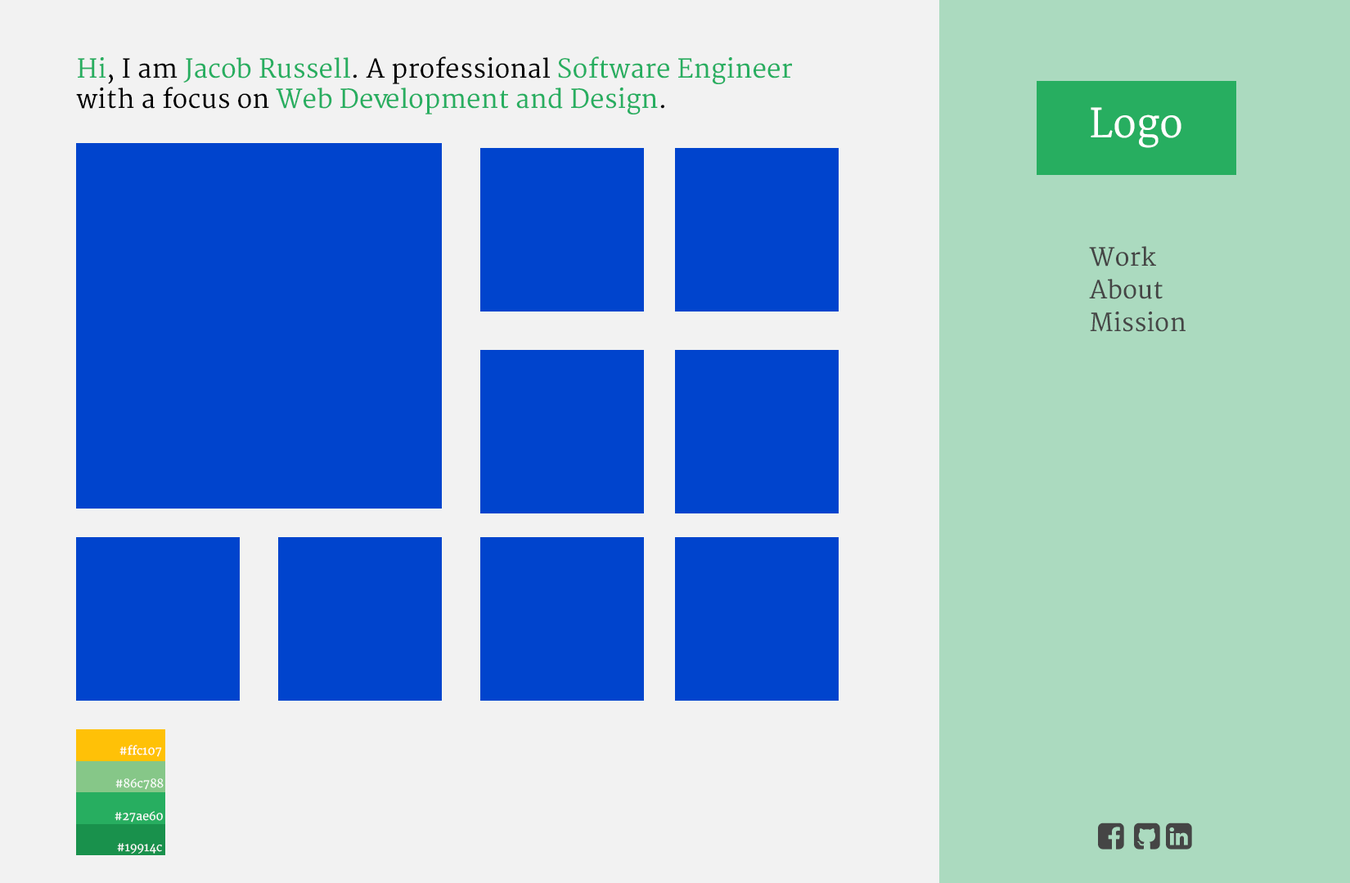
<style>
.page{position:relative;width:1350px;height:883px;background:#f2f2f2}
.page>*{position:absolute;margin:0}
.t1{font:25.6px "Merriweather";color:#27ae60}
.t2{font:25.6px "Merriweather";color:#000000}
.t3{font:39.3px "Merriweather";color:#ffffff}
.t4{font:24.5px "Merriweather";color:#454545}
.t5{font:24.5px "Merriweather";color:#464646}
.t6{font:11.5px "Merriweather";color:#ffffff}
</style>
<div class="page">
<p class="t1" style="left:76px;top:56px;width:716px;height:59px">Hi<span class="t2">, I am </span>Jacob Russell<span class="t2">. A professional </span>Software Engineer<br><span class="t2">with a focus on </span>Web Development and Design<span class="t2">.</span></p>
<p class="t3" style="left:1090px;top:107px;width:91px;height:41px">Logo</p>
<p class="t4" style="left:1089px;top:246px;width:67px;height:21px">Work</p>
<p class="t4" style="left:1089px;top:279px;width:73px;height:20px">About</p>
<p class="t5" style="left:1090px;top:312px;width:95px;height:20px">Mission</p>
<p class="t6" style="left:119px;top:745px;width:43px;height:12px">#ffc107</p>
<p class="t6" style="left:115px;top:779px;width:49px;height:11px">#86c788</p>
<p class="t6" style="left:115px;top:811px;width:48px;height:12px">#27ae60</p>
<p class="t6" style="left:117px;top:843px;width:45px;height:11px">#19914c</p>
</div>
